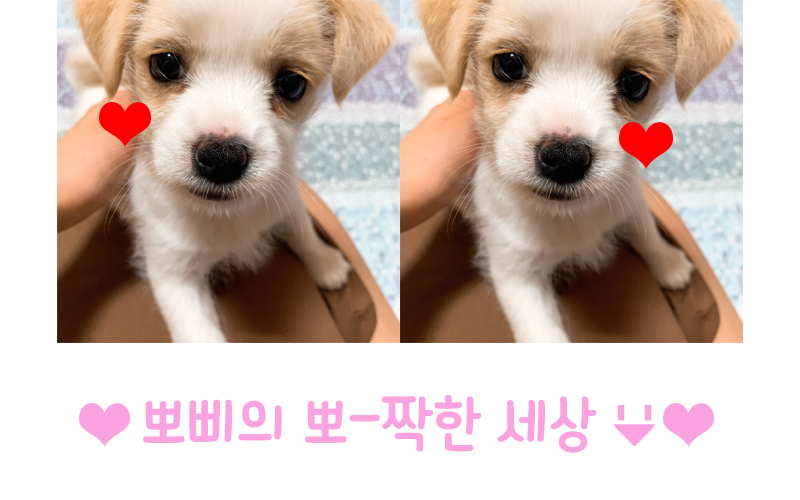
<style>
.page{position:relative;width:800px;height:500px;background:#ffffff}
.page>*{position:absolute;margin:0}
.t1{font:60px "TTManbokiR";color:#faa3e0}
</style>
<div class="page">
<p class="t1" style="left:143px;top:394px;width:454px;height:59px">뽀삐의 뽀-짝한 세상</p>
</div>
